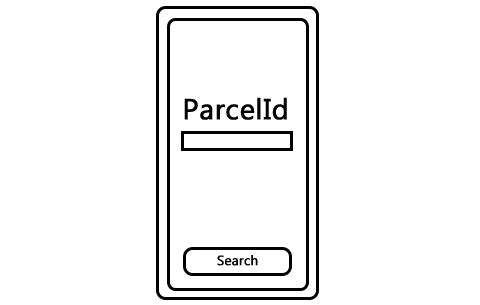
<style>
.page{position:relative;width:480px;height:305px;background:#ffffff}
.page>*{position:absolute;margin:0}
.t1{font:28.8px "Ebrima";color:#000000;font-weight:bold}
.t2{font:13.5px "Ebrima";color:#000000;font-weight:bold}
</style>
<div class="page">
<p class="t1" style="left:184px;top:97px;width:103px;height:23px">ParcelId</p>
<p class="t2" style="left:217px;top:255px;width:41px;height:11px">Search</p>
</div>
